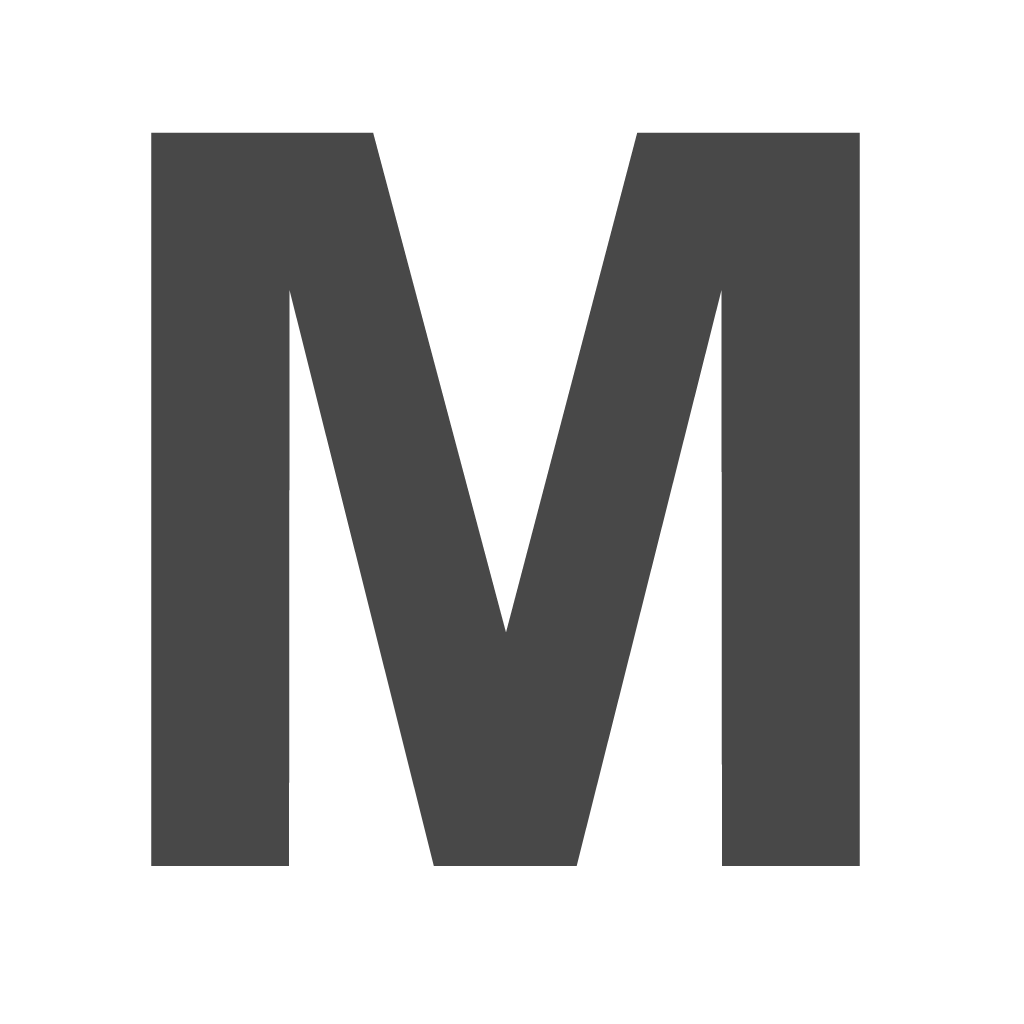
<style>
.page{position:relative;width:1024px;height:1024px;background:#ffffff}
.page>*{position:absolute;margin:0}
.t1{font:1024px "Arial-BoldMT";color:#484848}
</style>
<div class="page">
<p class="t1" style="left:151px;top:132px;width:709px;height:734px">M</p>
</div>
